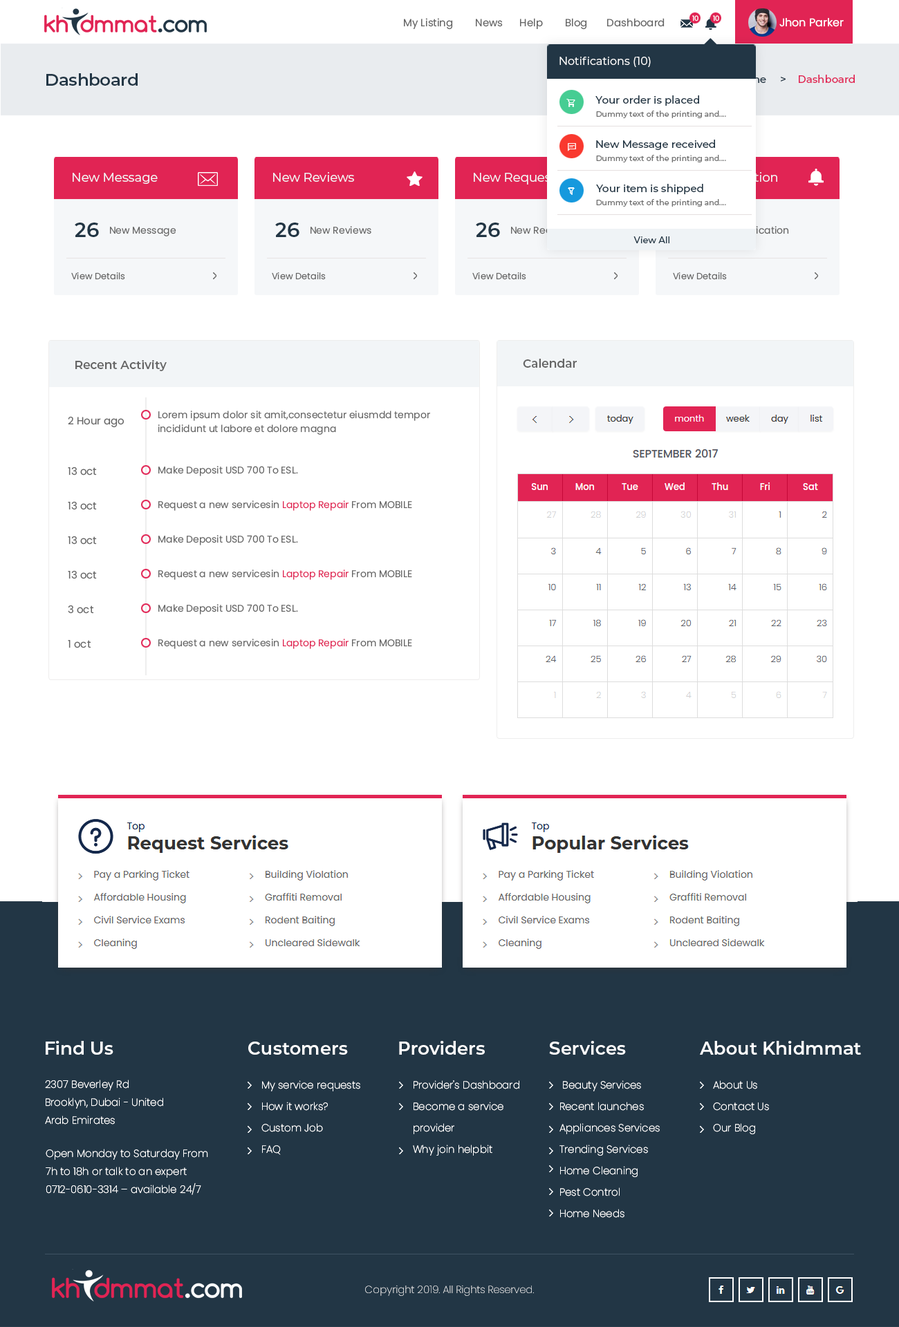
<style>
.page{position:relative;width:899px;height:1327px;background:#ffffff}
.page>*{position:absolute;margin:0}
.t1{font:10.4px "Poppins-Regular";color:#666666}
.t2{font:9.7px "Poppins-Regular";color:#666666}
.t3{font:11.1px "Poppins-Regular";color:#ffffff}
.t4{font:6.9px "Poppins-Regular";color:#ffffff}
.t5{font:11.1px "Montserrat-Regular";color:#ffffff}
.t6{font:16.6px "Montserrat-SemiBold";color:#223645}
.t7{font:10.4px "Montserrat-Medium";color:#223645}
.t8{font:10.4px "Montserrat-Medium";color:#05315e}
.t9{font:10.4px "Montserrat-Medium";color:#e12454}
.t10{font:7.6px "Montserrat-Medium";color:#707070}
.t11{font:12.4px "Montserrat-Regular";color:#f2f5f7}
.t12{font:20px "Montserrat-SemiBold";color:#223645}
.t13{font:9.7px "Poppins-Regular"}
.t14{font:9px "Montserrat-Medium";color:#223645}
.t15{font:9px "Poppins-Regular";color:#666666}
.t16{font:11.8px "Montserrat-SemiBold";color:#666666}
.t17{font:9.7px/13.8px "Poppins-Regular";color:#666666}
.t18{font:9.7px "Poppins-Regular";color:#e12454}
.t19{font:18px "Montserrat-SemiBold";color:#ffffff}
.t20{font:10.4px/18px "Poppins-ExtraLight";color:#ffffff}
.t21{font:10.4px/21.4px "Poppins-ExtraLight";color:#ffffff}
.t22{font:10.4px "Poppins-ExtraLight"}
</style>
<div class="page">
<p class="t1" style="left:404px;top:18px;width:439px;height:12px"><span class="t2">       </span>         My Listing        News      Help        Blog       Dashboard                                          <span class="t3">Jhon Parker</span></p>
<p class="t4" style="left:692px;top:15px;width:6px;height:6px">10</p>
<p class="t4" style="left:713px;top:15px;width:6px;height:6px">10</p>
<p class="t5" style="left:559px;top:57px;width:91px;height:10px">Notifications (10)</p>
<p class="t6" style="left:46px;top:73px;width:92px;height:13px">Dashboard</p>
<p class="t7" style="left:735px;top:75px;width:119px;height:8px"><span class="t8">    </span>Home     &gt;    <span class="t9">Dashboard</span></p>
<p class="t7" style="left:595px;top:95px;width:104px;height:11px">Your order is placed</p>
<p class="t10" style="left:596px;top:111px;width:130px;height:7px">Dummy text of the printing and....</p>
<p class="t7" style="left:596px;top:140px;width:119px;height:10px">New Message received</p>
<p class="t10" style="left:596px;top:155px;width:130px;height:7px">Dummy text of the printing and....</p>
<p class="t11" style="left:73px;top:173px;width:85px;height:11px">New Message</p>
<p class="t11" style="left:273px;top:172px;width:81px;height:10px">New Reviews</p>
<p class="t11" style="left:473px;top:173px;width:83px;height:12px">New Request</p>
<p class="t7" style="left:596px;top:184px;width:107px;height:10px">Your item is shipped</p>
<p class="t10" style="left:596px;top:199px;width:130px;height:8px">Dummy text of the printing and....</p>
<p class="t12" style="left:75px;top:223px;width:24px;height:14px">26</p>
<p class="t2" style="left:110px;top:227px;width:66px;height:9px">New Message</p>
<p class="t12" style="left:275px;top:223px;width:24px;height:14px">26</p>
<p class="t2" style="left:310px;top:226px;width:61px;height:8px">New Reviews</p>
<p class="t12" style="left:476px;top:223px;width:24px;height:14px">26</p>
<p class="t13" style="left:511px;top:227px;width:61px;height:9px">New Request</p>
<p class="t13" style="left:711px;top:226px;width:78px;height:8px">New Notification</p>
<p class="t14" style="left:633px;top:236px;width:36px;height:7px">View All</p>
<p class="t15" style="left:71px;top:272px;width:54px;height:8px">View Details</p>
<p class="t15" style="left:272px;top:272px;width:54px;height:8px">View Details</p>
<p class="t15" style="left:472px;top:272px;width:54px;height:8px">View Details</p>
<p class="t15" style="left:673px;top:272px;width:53px;height:8px">View Details</p>
<p class="t16" style="left:75px;top:360px;width:92px;height:11px">Recent Activity</p>
<p class="t16" style="left:523px;top:359px;width:53px;height:9px">Calendar</p>
<p class="t17" style="left:158px;top:411px;width:272px;height:24px">Lorem ipsum dolor sit amit,consectetur eiusmdd tempor<br>incididunt ut labore et dolore magna</p>
<p class="t1" style="left:68px;top:416px;width:56px;height:12px">2 Hour ago</p>
<p class="t1" style="left:68px;top:467px;width:29px;height:9px">13 oct</p>
<p class="t2" style="left:158px;top:466px;width:140px;height:10px">Make Deposit USD 700 To ESL.</p>
<p class="t1" style="left:68px;top:501px;width:29px;height:9px">13 oct</p>
<p class="t2" style="left:158px;top:500px;width:254px;height:11px">Request a new servicesin <span class="t18">Laptop Repair</span> From MOBILE</p>
<p class="t1" style="left:68px;top:536px;width:29px;height:9px">13 oct</p>
<p class="t2" style="left:158px;top:535px;width:140px;height:10px">Make Deposit USD 700 To ESL.</p>
<p class="t2" style="left:158px;top:570px;width:254px;height:10px">Request a new servicesin <span class="t18">Laptop Repair</span> From MOBILE</p>
<p class="t1" style="left:68px;top:570px;width:29px;height:9px">13 oct</p>
<p class="t1" style="left:68px;top:605px;width:26px;height:9px">3 oct</p>
<p class="t2" style="left:158px;top:604px;width:140px;height:10px">Make Deposit USD 700 To ESL.</p>
<p class="t1" style="left:68px;top:640px;width:23px;height:8px">1 oct</p>
<p class="t2" style="left:158px;top:639px;width:254px;height:10px">Request a new servicesin <span class="t18">Laptop Repair</span> From MOBILE</p>
<p class="t19" style="left:46px;top:1041px;width:67px;height:14px">Find Us</p>
<p class="t19" style="left:248px;top:1042px;width:100px;height:13px">Customers</p>
<p class="t19" style="left:399px;top:1041px;width:86px;height:14px">Providers</p>
<p class="t19" style="left:549px;top:1041px;width:77px;height:14px">Services</p>
<p class="t19" style="left:699px;top:1041px;width:162px;height:14px">About Khidmmat</p>
<p class="t20" style="left:45px;top:1080px;width:118px;height:45px">2307 Beverley Rd<br>Brooklyn, Dubai - United Arab Emirates</p>
<p class="t21" style="left:261px;top:1080px;width:99px;height:75px">My service requests<br>    How it works?<br>    Custom Job<br>    FAQ</p>
<p class="t21" style="left:413px;top:1080px;width:106px;height:76px">Provider's Dashboard<br>    Become a service <br>    provider<br>    Why join helpbit</p>
<p class="t21" style="left:559px;top:1080px;width:100px;height:138px">Beauty Services <br>Recent launches <br>Appliances Services Trending Services <br>Home Cleaning <br>Pest Control <br>Home Needs</p>
<p class="t21" style="left:713px;top:1080px;width:56px;height:55px">About Us<br> Contact Us<br> Our Blog</p>
<p class="t20" style="left:46px;top:1149px;width:162px;height:46px">Open Monday to Saturday From 7h to 18h or talk to an expert 0712-0610-3314 – available 24/7</p>
<p class="t22" style="left:365px;top:1285px;width:169px;height:11px">Copyright 2019. All Rights Reserved.</p>
</div>
